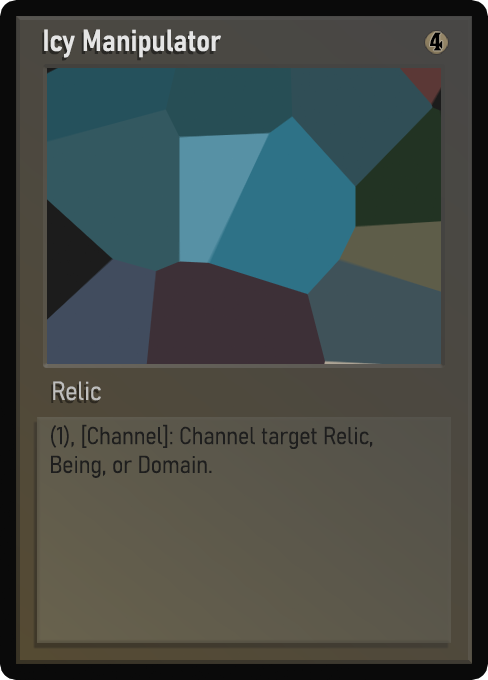
<style>
.page{position:relative;width:488px;height:680px}
.page>*{position:absolute;margin:0}
.t1{font:30px "Bahnschrift-SemiBoldSemiCondensed";color:#f2f2f2;font-weight:bold}
.t2{font:25px "WTRRoycroft";color:#000000;font-weight:bold;scale:1.09 1}
.t3{font:26px "Bahnschrift-LightSemiCondensed";color:#c8c8c8;font-weight:bold}
.t4{font:24px "Bahnschrift-LightSemiCondensed";color:#1e1e1e;font-weight:bold}
</style>
<div class="page">
<p class="t1" style="left:44px;top:29px;width:177px;height:29px;opacity:0.9">Icy Manipulator</p>
<p class="t2" style="left:430px;top:32px;width:13px;height:19px">4</p>
<p class="t3" style="left:53px;top:381px;width:48px;height:20px;opacity:0.9">Relic</p>
<p class="t4" style="left:51px;top:424px;width:322px;height:54px">(1), [Channel]: Channel target Relic, Being, or Domain.</p>
</div>
